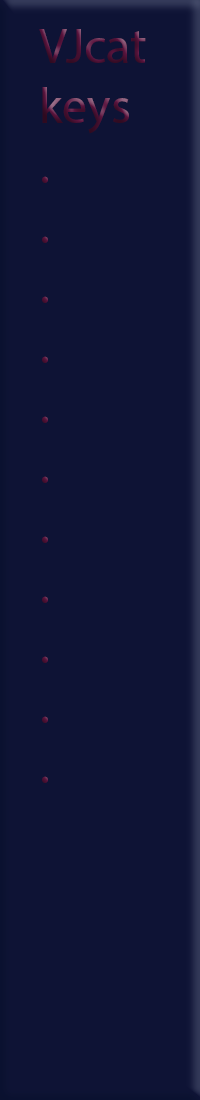
<style>
.page{position:relative;width:200px;height:1100px;background:#0e1335}
.page>*{position:absolute;margin:0}
.t1{font:50px "MyriadPro-Regular"}
</style>
<div class="page">
<p class="t1" style="left:39px;top:29px;width:107px;height:754px">VJcat<br>keys<br>.<br>.<br>.<br>.<br>.<br>.<br>.<br>.<br>.<br>.<br>.</p>
</div>
